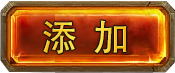
<style>
.page{position:relative;width:175px;height:73px}
.page>*{position:absolute;margin:0}
.t1{font:36px "FZHZGBJW--GB1-0";letter-spacing:0.1em}
</style>
<div class="page">
<p class="t1" style="left:43px;top:20px;width:84px;height:34px">添 加</p>
</div>
